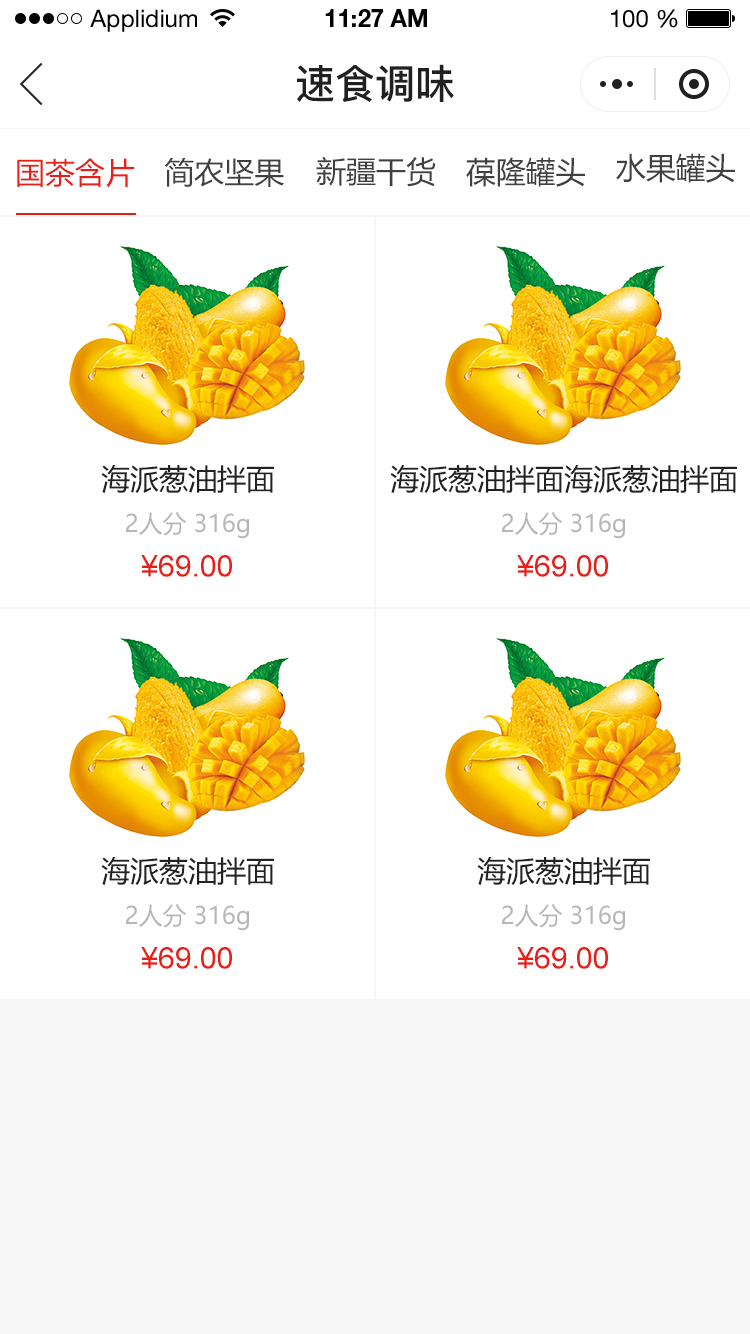
<style>
.page{position:relative;width:750px;height:1334px;background:#ffffff}
.page>*{position:absolute;margin:0}
.t1{font:24px "HelveticaNeueLTStd-Roman";color:#000000}
.t2{font:24px "HelveticaNeueLTStd-Bd";color:#000000}
.t3{font:40px "PingFang-SC-Bold";color:#202020;text-transform:uppercase}
.t4{font:30px "MicrosoftYaHei";color:#e61f18;text-transform:uppercase}
.t5{font:30px "MicrosoftYaHei";color:#404040;text-transform:uppercase}
.t6{font:29px "MicrosoftYaHei";color:#222222;text-transform:uppercase}
.t7{font:24px "MicrosoftYaHei";color:#b6b6b6}
.t8{font:30px "ArialMT";color:#e61f18;text-transform:uppercase}
</style>
<div class="page">
<p class="t1" style="left:90px;top:9px;width:107px;height:23px">Applidium</p>
<p class="t2" style="left:325px;top:9px;width:102px;height:18px">11:27 AM</p>
<p class="t1" style="left:611px;top:9px;width:67px;height:19px">100 %</p>
<p class="t3" style="left:297px;top:64px;width:157px;height:38px">速食调味</p>
<p class="t4" style="left:17px;top:158px;width:118px;height:30px">国茶含片</p>
<p class="t5" style="left:164px;top:158px;width:120px;height:29px">简农坚果</p>
<p class="t5" style="left:316px;top:156px;width:120px;height:31px">新疆干货</p>
<p class="t5" style="left:466px;top:157px;width:119px;height:30px">葆隆罐头</p>
<p class="t5" style="left:616px;top:153px;width:119px;height:30px">水果罐头</p>
<p class="t6" style="left:101px;top:465px;width:173px;height:29px">海派葱油拌面</p>
<p class="t6" style="left:390px;top:465px;width:347px;height:29px">海派葱油拌面海派葱油拌面</p>
<p class="t7" style="left:126px;top:512px;width:123px;height:27px">2人分 316g</p>
<p class="t7" style="left:502px;top:512px;width:123px;height:27px">2人分 316g</p>
<p class="t8" style="left:141px;top:555px;width:91px;height:22px">¥69.00</p>
<p class="t8" style="left:517px;top:555px;width:91px;height:22px">¥69.00</p>
<p class="t6" style="left:101px;top:857px;width:173px;height:29px">海派葱油拌面</p>
<p class="t6" style="left:477px;top:857px;width:173px;height:29px">海派葱油拌面</p>
<p class="t7" style="left:126px;top:904px;width:123px;height:27px">2人分 316g</p>
<p class="t7" style="left:502px;top:904px;width:123px;height:27px">2人分 316g</p>
<p class="t8" style="left:141px;top:947px;width:91px;height:22px">¥69.00</p>
<p class="t8" style="left:517px;top:947px;width:91px;height:22px">¥69.00</p>
</div>
